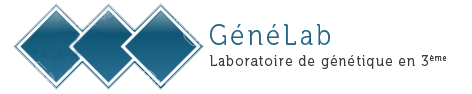
<style>
.page{position:relative;width:472px;height:94px;background:#ffffff}
.page>*{position:absolute;margin:0}
.t1{font:28.8px "Museo-300";letter-spacing:0.12em;color:#206587;scale:0.88 1}
.t2{font:14.4px "Museo-300";letter-spacing:0.12em;color:#3b3c3d;scale:0.88 1}
</style>
<div class="page">
<p class="t1" style="left:210px;top:24px;width:120px;height:21px">GénéLab</p>
<p class="t2" style="left:210px;top:55px;width:237px;height:14px">Laboratoire de génétique en 3ème</p>
</div>
